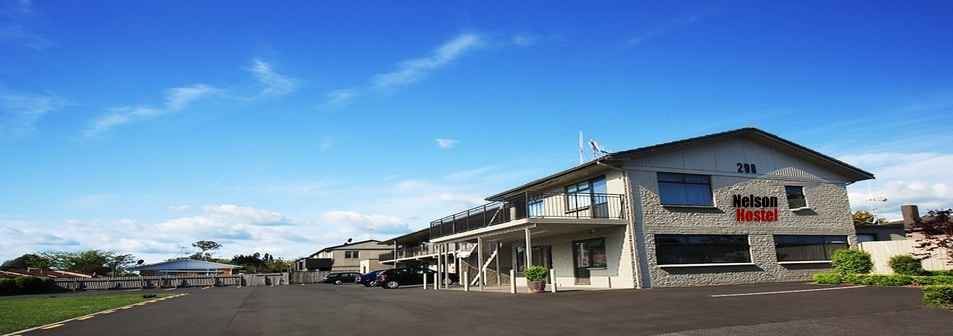
<style>
.page{position:relative;width:953px;height:336px}
.page>*{position:absolute;margin:0}
.t1{font:16px/14px "Impact"}
</style>
<div class="page">
<p class="t1" style="left:733px;top:194px;width:45px;height:28px;text-align:right">Nelson<br>Hostel</p>
</div>
